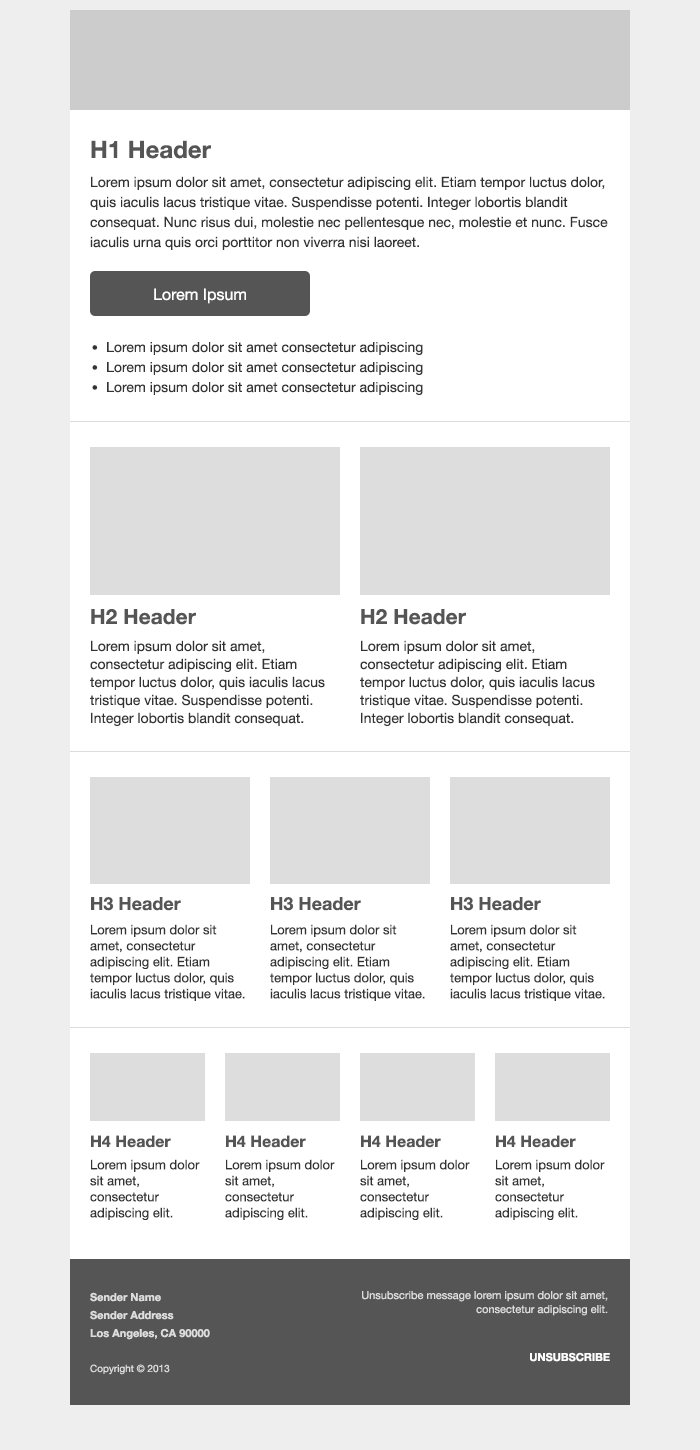
<style>
.page{position:relative;width:700px;height:1450px;background:#ffffff}
.page>*{position:absolute;margin:0}
.t1{font:24px "HelveticaNeue-Bold";color:#555555}
.t2{font:14px/20px "HelveticaNeue";color:#333333}
.t3{font:16px "HelveticaNeue";color:#ffffff}
.t4{font:21px/20px "HelveticaNeue";color:#333333}
.t5{font:21px "HelveticaNeue-Bold";color:#555555}
.t6{font:14px/18px "HelveticaNeue";color:#333333}
.t7{font:18px "HelveticaNeue-Bold";color:#555555}
.t8{font:13px/16px "HelveticaNeue";color:#333333}
.t9{font:16px "HelveticaNeue-Bold";color:#555555}
.t10{font:11px/18px "HelveticaNeue-Bold";color:#dddddd}
.t11{font:11px/14px "HelveticaNeue";color:#dddddd}
.t12{font:11px "HelveticaNeue-Bold";color:#fefefe;text-transform:uppercase}
.t13{font:10px "HelveticaNeue";color:#dddddd}
</style>
<div class="page">
<p class="t1" style="left:91px;top:140px;width:120px;height:19px">H1 Header</p>
<p class="t2" style="left:90px;top:176px;width:518px;height:74px">Lorem ipsum dolor sit amet, consectetur adipiscing elit. Etiam tempor luctus dolor, quis iaculis lacus tristique vitae. Suspendisse potenti. Integer lobortis blandit consequat. Nunc risus dui, molestie nec pellentesque nec, molestie et nunc. Fusce iaculis urna quis orci porttitor non viverra nisi laoreet.</p>
<p class="t3" style="left:154px;top:288px;width:92px;height:16px">Lorem Ipsum</p>
<p class="t2" style="left:92px;top:342px;width:331px;height:53px"><span class="t4">•</span>  Lorem ipsum dolor sit amet consectetur adipiscing<br><span class="t4">•</span>  Lorem ipsum dolor sit amet consectetur adipiscing<br><span class="t4">•</span>  Lorem ipsum dolor sit amet consectetur adipiscing</p>
<p class="t5" style="left:91px;top:609px;width:105px;height:16px">H2 Header</p>
<p class="t5" style="left:361px;top:609px;width:105px;height:16px">H2 Header</p>
<p class="t6" style="left:90px;top:640px;width:235px;height:86px">Lorem ipsum dolor sit amet, consectetur adipiscing elit. Etiam tempor luctus dolor, quis iaculis lacus tristique vitae. Suspendisse potenti. Integer lobortis blandit consequat.</p>
<p class="t6" style="left:360px;top:640px;width:235px;height:86px">Lorem ipsum dolor sit amet, consectetur adipiscing elit. Etiam tempor luctus dolor, quis iaculis lacus tristique vitae. Suspendisse potenti. Integer lobortis blandit consequat.</p>
<p class="t7" style="left:91px;top:897px;width:90px;height:14px">H3 Header</p>
<p class="t7" style="left:271px;top:897px;width:90px;height:14px">H3 Header</p>
<p class="t7" style="left:451px;top:897px;width:90px;height:14px">H3 Header</p>
<p class="t8" style="left:90px;top:924px;width:155px;height:77px">Lorem ipsum dolor sit amet, consectetur adipiscing elit. Etiam tempor luctus dolor, quis iaculis lacus tristique vitae.</p>
<p class="t8" style="left:270px;top:924px;width:155px;height:77px">Lorem ipsum dolor sit amet, consectetur adipiscing elit. Etiam tempor luctus dolor, quis iaculis lacus tristique vitae.</p>
<p class="t8" style="left:450px;top:924px;width:155px;height:77px">Lorem ipsum dolor sit amet, consectetur adipiscing elit. Etiam tempor luctus dolor, quis iaculis lacus tristique vitae.</p>
<p class="t9" style="left:91px;top:1135px;width:80px;height:13px">H4 Header</p>
<p class="t9" style="left:226px;top:1135px;width:80px;height:13px">H4 Header</p>
<p class="t9" style="left:361px;top:1135px;width:80px;height:13px">H4 Header</p>
<p class="t9" style="left:496px;top:1135px;width:80px;height:13px">H4 Header</p>
<p class="t8" style="left:90px;top:1159px;width:110px;height:61px">Lorem ipsum dolor sit amet, consectetur adipiscing elit.</p>
<p class="t8" style="left:225px;top:1159px;width:110px;height:61px">Lorem ipsum dolor sit amet, consectetur adipiscing elit.</p>
<p class="t8" style="left:360px;top:1159px;width:110px;height:61px">Lorem ipsum dolor sit amet, consectetur adipiscing elit.</p>
<p class="t8" style="left:495px;top:1159px;width:110px;height:61px">Lorem ipsum dolor sit amet, consectetur adipiscing elit.</p>
<p class="t10" style="left:90px;top:1292px;width:120px;height:48px">Sender Name<br>Sender Address<br>Los Angeles, CA 90000</p>
<p class="t11" style="left:362px;top:1291px;width:246px;height:25px;text-align:right">Unsubscribe message lorem ipsum dolor sit amet, consectetur adipiscing elit.</p>
<p class="t12" style="left:530px;top:1352px;width:80px;height:10px">Unsubscribe</p>
<p class="t13" style="left:90px;top:1364px;width:80px;height:11px">Copyright © 2013</p>
</div>
